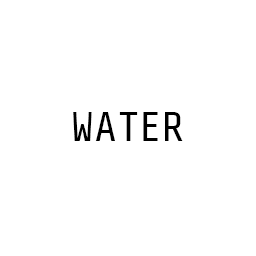
<style>
.page{position:relative;width:256px;height:256px;background:#ffffff}
.page>*{position:absolute;margin:0}
.t1{font:42.5px "ShareTechMono-Regular";color:#000000;text-transform:uppercase}
</style>
<div class="page">
<p class="t1" style="left:73px;top:112px;width:110px;height:29px">WATER</p>
</div>
